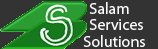
<style>
.page{position:relative;width:158px;height:49px;background:#333333}
.page>*{position:absolute;margin:0}
.t1{font:16px "MyriadPro-Regular";color:#fafbfa}
</style>
<div class="page">
<p class="t1" style="left:89px;top:2px;width:40px;height:12px">Salam</p>
<p class="t1" style="left:89px;top:19px;width:54px;height:11px">Services</p>
<p class="t1" style="left:83px;top:35px;width:62px;height:12px">Solutions</p>
</div>
